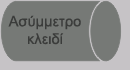
<style>
.page{position:relative;width:130px;height:70px;background:#767976}
.page>*{position:absolute;margin:0}
.t1{font:14.7px "ArialMT";color:#3b3c3b}
</style>
<div class="page">
<p class="t1" style="left:8px;top:15px;width:73px;height:30px;text-align:center">Ασύμμετρο<br>κλειδί</p>
</div>
